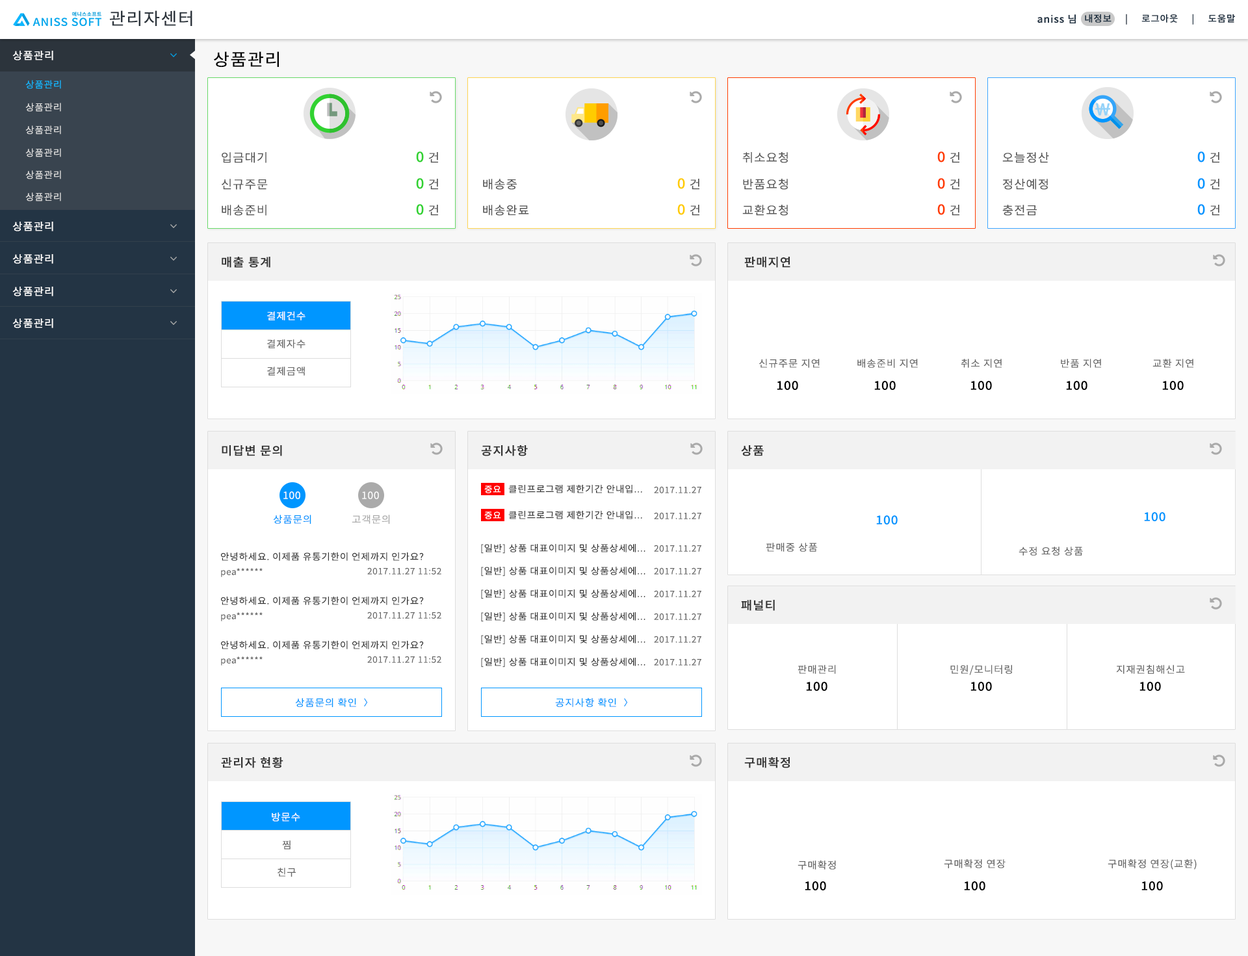
<style>
.page{position:relative;width:1248px;height:956px;background:#ffffff}
.page>*{position:absolute;margin:0}
.t1{font:16.9px "NotoSansCJKkr-Regular";letter-spacing:0.05em;color:#2c343c;scale:1.05 1}
.t2{font:9.7px "NotoSansCJKkr-Medium";letter-spacing:0.05em;color:#233444;scale:1.05 1}
.t3{font:9.1px "NotoSansCJKkr-Medium";letter-spacing:0.05em;color:#233444;scale:1.05 1}
.t4{font:10.4px "NotoSansCJKkr-Regular";letter-spacing:0.05em;color:#ffffff;scale:1.05 1}
.t5{font:16.9px "NotoSansCJKkr-Regular";letter-spacing:0.05em;color:#010101;scale:1.05 1}
.t6{font:9.1px "NotoSansCJKkr-DemiLight";letter-spacing:0.05em;color:#0fb7ff;scale:1.05 1}
.t7{font:9.1px "NotoSansCJKkr-DemiLight";letter-spacing:0.05em;color:#dedede;scale:1.05 1}
.t8{font:11.7px "NotoSansCJKkr-DemiLight";letter-spacing:0.05em;color:#555555;scale:1.05 1}
.t9{font:13.6px "NotoSansCJKkr-Medium";letter-spacing:0.05em;color:#31d231;scale:1.05 1}
.t10{font:13.6px "NotoSansCJKkr-Medium";letter-spacing:0.05em;color:#ff3c00;scale:1.05 1}
.t11{font:13.6px "NotoSansCJKkr-Medium";letter-spacing:0.05em;color:#0096ff;scale:1.05 1}
.t12{font:13.6px "NotoSansCJKkr-Medium";letter-spacing:0.05em;color:#ffcc00;scale:1.05 1}
.t13{font:11.7px "NotoSansCJKkr-Medium";letter-spacing:0.05em;color:#333333;scale:1.05 1}
.t14{font:9.7px "NotoSansCJKkr-DemiLight";letter-spacing:0.05em;color:#fffdfd;scale:1.05 1}
.t15{font:9.7px "NotoSansCJKkr-DemiLight";letter-spacing:0.05em;color:#666666;scale:1.05 1}
.t16{font:11.7px "NotoSansCJKkr-Medium";letter-spacing:0.05em;color:#000000;scale:1.05 1}
.t17{font:8.4px "NotoSansCJKkr-DemiLight";letter-spacing:0.05em;color:#ffffff;scale:1.05 1}
.t18{font:9.1px "NotoSansCJKkr-DemiLight";letter-spacing:0.05em;color:#333333;scale:1.05 1}
.t19{font:9.7px "NotoSansCJKkr-DemiLight";letter-spacing:0.05em;color:#ffffff;scale:1.05 1}
.t20{font:8.4px "NotoSansCJKkr-DemiLight";letter-spacing:0.05em;color:#666666;scale:1.05 1}
.t21{font:9.7px "NotoSansCJKkr-DemiLight";letter-spacing:0.05em;color:#0096ff;scale:1.05 1}
.t22{font:9.7px "NotoSansCJKkr-DemiLight";letter-spacing:0.05em;color:#aaaaaa;scale:1.05 1}
.t23{font:11.7px "NotoSansCJKkr-Medium";letter-spacing:0.05em;color:#0096ff;scale:1.05 1}
.t24{font:8.4px "YDIYGO320";letter-spacing:0.05em;color:#0096ff;scale:1.05 1}
</style>
<div class="page">
<p class="t1" style="left:110px;top:10px;width:82px;height:16px">관리자센터</p>
<p class="t2" style="left:1037px;top:14px;width:38px;height:9px">aniss 님</p>
<p class="t3" style="left:1084px;top:14px;width:151px;height:11px">내정보     |     로그아웃     |     도움말</p>
<p class="t4" style="left:12px;top:51px;width:41px;height:9px">상품관리</p>
<p class="t5" style="left:214px;top:51px;width:65px;height:16px">상품관리</p>
<p class="t6" style="left:25px;top:80px;width:36px;height:9px">상품관리</p>
<p class="t7" style="left:25px;top:103px;width:36px;height:9px">상품관리</p>
<p class="t7" style="left:25px;top:125px;width:36px;height:10px">상품관리</p>
<p class="t7" style="left:25px;top:148px;width:36px;height:9px">상품관리</p>
<p class="t8" style="left:222px;top:152px;width:44px;height:11px">입금대기</p>
<p class="t9" style="left:416px;top:151px;width:22px;height:12px">0 <span class="t8">건</span></p>
<p class="t8" style="left:742px;top:152px;width:46px;height:11px">취소요청</p>
<p class="t10" style="left:937px;top:151px;width:22px;height:12px">0 <span class="t8">건</span></p>
<p class="t8" style="left:1002px;top:152px;width:47px;height:11px">오늘정산</p>
<p class="t11" style="left:1197px;top:151px;width:22px;height:12px">0 <span class="t8">건</span></p>
<p class="t7" style="left:25px;top:170px;width:36px;height:9px">상품관리</p>
<p class="t8" style="left:222px;top:179px;width:46px;height:11px">신규주문</p>
<p class="t9" style="left:416px;top:178px;width:22px;height:12px">0 <span class="t8">건</span></p>
<p class="t8" style="left:483px;top:179px;width:34px;height:11px">배송중</p>
<p class="t12" style="left:677px;top:178px;width:22px;height:12px">0 <span class="t8">건</span></p>
<p class="t8" style="left:743px;top:179px;width:45px;height:11px">반품요청</p>
<p class="t10" style="left:937px;top:178px;width:22px;height:12px">0 <span class="t8">건</span></p>
<p class="t8" style="left:1002px;top:179px;width:45px;height:11px">정산예정</p>
<p class="t11" style="left:1197px;top:178px;width:22px;height:12px">0 <span class="t8">건</span></p>
<p class="t7" style="left:25px;top:192px;width:36px;height:9px">상품관리</p>
<p class="t8" style="left:222px;top:205px;width:44px;height:11px">배송준비</p>
<p class="t9" style="left:416px;top:204px;width:22px;height:12px">0 <span class="t8">건</span></p>
<p class="t8" style="left:483px;top:205px;width:46px;height:11px">배송완료</p>
<p class="t12" style="left:677px;top:204px;width:22px;height:12px">0 <span class="t8">건</span></p>
<p class="t8" style="left:742px;top:205px;width:46px;height:11px">교환요청</p>
<p class="t10" style="left:937px;top:204px;width:22px;height:12px">0 <span class="t8">건</span></p>
<p class="t8" style="left:1002px;top:205px;width:34px;height:11px">충전금</p>
<p class="t11" style="left:1197px;top:204px;width:22px;height:12px">0 <span class="t8">건</span></p>
<p class="t4" style="left:12px;top:222px;width:41px;height:9px">상품관리</p>
<p class="t4" style="left:12px;top:254px;width:41px;height:10px">상품관리</p>
<p class="t13" style="left:222px;top:257px;width:48px;height:11px">매출 통계</p>
<p class="t13" style="left:744px;top:257px;width:46px;height:11px">판매지연</p>
<p class="t4" style="left:12px;top:287px;width:41px;height:9px">상품관리</p>
<p class="t14" style="left:267px;top:311px;width:38px;height:9px">결제건수</p>
<p class="t4" style="left:12px;top:318px;width:41px;height:10px">상품관리</p>
<p class="t15" style="left:267px;top:339px;width:38px;height:9px">결제자수</p>
<p class="t15" style="left:759px;top:359px;width:60px;height:9px">신규주문 지연</p>
<p class="t15" style="left:857px;top:359px;width:60px;height:9px">배송준비 지연</p>
<p class="t15" style="left:960px;top:359px;width:41px;height:9px">취소 지연</p>
<p class="t15" style="left:1060px;top:359px;width:41px;height:9px">반품 지연</p>
<p class="t15" style="left:1152px;top:359px;width:41px;height:9px">교환 지연</p>
<p class="t15" style="left:267px;top:366px;width:38px;height:10px">결제금액</p>
<p class="t16" style="left:776px;top:381px;width:22px;height:9px">100</p>
<p class="t16" style="left:874px;top:381px;width:21px;height:9px">100</p>
<p class="t16" style="left:970px;top:381px;width:22px;height:9px">100</p>
<p class="t16" style="left:1066px;top:381px;width:21px;height:9px">100</p>
<p class="t16" style="left:1162px;top:381px;width:21px;height:9px">100</p>
<p class="t13" style="left:222px;top:445px;width:60px;height:11px">미답변 문의</p>
<p class="t13" style="left:481px;top:445px;width:47px;height:11px">공지사항</p>
<p class="t13" style="left:741px;top:445px;width:22px;height:11px">상품</p>
<p class="t17" style="left:484px;top:485px;width:17px;height:8px">중요</p>
<p class="t18" style="left:508px;top:485px;width:134px;height:8px">클린프로그램 제한기간 안내입...</p>
<p class="t19" style="left:283px;top:491px;width:17px;height:8px">100</p>
<p class="t19" style="left:362px;top:491px;width:17px;height:8px">100</p>
<p class="t20" style="left:654px;top:486px;width:47px;height:7px">2017.11.27</p>
<p class="t21" style="left:273px;top:515px;width:38px;height:9px">상품문의</p>
<p class="t22" style="left:352px;top:515px;width:38px;height:9px">고객문의</p>
<p class="t17" style="left:484px;top:511px;width:17px;height:8px">중요</p>
<p class="t18" style="left:508px;top:511px;width:134px;height:8px">클린프로그램 제한기간 안내입...</p>
<p class="t20" style="left:654px;top:512px;width:47px;height:7px">2017.11.27</p>
<p class="t23" style="left:876px;top:515px;width:21px;height:9px">100</p>
<p class="t23" style="left:1144px;top:512px;width:21px;height:9px">100</p>
<p class="t18" style="left:481px;top:544px;width:164px;height:10px">[일반] 상품 대표이미지 및 상품상세에...</p>
<p class="t20" style="left:654px;top:545px;width:47px;height:7px">2017.11.27</p>
<p class="t15" style="left:765px;top:543px;width:52px;height:9px">판매중 상품</p>
<p class="t18" style="left:221px;top:552px;width:203px;height:9px">안녕하세요. 이제품 유통기한이 언제까지 인가요?</p>
<p class="t15" style="left:1018px;top:546px;width:65px;height:10px">수정 요청 상품</p>
<p class="t20" style="left:221px;top:568px;width:42px;height:9px">pea******</p>
<p class="t20" style="left:367px;top:567px;width:74px;height:7px">2017.11.27 11:52</p>
<p class="t18" style="left:481px;top:567px;width:164px;height:9px">[일반] 상품 대표이미지 및 상품상세에...</p>
<p class="t20" style="left:654px;top:567px;width:47px;height:7px">2017.11.27</p>
<p class="t18" style="left:481px;top:589px;width:164px;height:10px">[일반] 상품 대표이미지 및 상품상세에...</p>
<p class="t20" style="left:654px;top:590px;width:47px;height:7px">2017.11.27</p>
<p class="t18" style="left:221px;top:596px;width:203px;height:9px">안녕하세요. 이제품 유통기한이 언제까지 인가요?</p>
<p class="t13" style="left:741px;top:600px;width:34px;height:11px">패널티</p>
<p class="t20" style="left:221px;top:612px;width:42px;height:9px">pea******</p>
<p class="t20" style="left:367px;top:611px;width:74px;height:8px">2017.11.27 11:52</p>
<p class="t18" style="left:481px;top:612px;width:164px;height:10px">[일반] 상품 대표이미지 및 상품상세에...</p>
<p class="t20" style="left:654px;top:613px;width:47px;height:7px">2017.11.27</p>
<p class="t18" style="left:221px;top:641px;width:203px;height:8px">안녕하세요. 이제품 유통기한이 언제까지 인가요?</p>
<p class="t18" style="left:481px;top:635px;width:164px;height:10px">[일반] 상품 대표이미지 및 상품상세에...</p>
<p class="t20" style="left:654px;top:635px;width:47px;height:8px">2017.11.27</p>
<p class="t20" style="left:221px;top:656px;width:42px;height:9px">pea******</p>
<p class="t20" style="left:367px;top:656px;width:74px;height:7px">2017.11.27 11:52</p>
<p class="t18" style="left:481px;top:658px;width:164px;height:9px">[일반] 상품 대표이미지 및 상품상세에...</p>
<p class="t20" style="left:654px;top:658px;width:47px;height:7px">2017.11.27</p>
<p class="t15" style="left:797px;top:665px;width:39px;height:9px">판매관리</p>
<p class="t15" style="left:950px;top:665px;width:62px;height:10px">민원/모니터링</p>
<p class="t15" style="left:1116px;top:665px;width:69px;height:9px">지재권침해신고</p>
<p class="t16" style="left:806px;top:682px;width:21px;height:9px">100</p>
<p class="t16" style="left:970px;top:682px;width:22px;height:9px">100</p>
<p class="t16" style="left:1139px;top:682px;width:21px;height:9px">100</p>
<p class="t21" style="left:295px;top:698px;width:61px;height:9px">상품문의 확인</p>
<p class="t24" style="left:364px;top:698px;width:4px;height:8px">&gt;</p>
<p class="t21" style="left:555px;top:698px;width:61px;height:9px">공지사항 확인</p>
<p class="t24" style="left:624px;top:698px;width:4px;height:8px">&gt;</p>
<p class="t13" style="left:221px;top:757px;width:62px;height:11px">관리자 현황</p>
<p class="t13" style="left:744px;top:757px;width:45px;height:11px">구매확정</p>
<p class="t14" style="left:272px;top:812px;width:28px;height:9px">방문수</p>
<p class="t15" style="left:282px;top:840px;width:8px;height:9px">찜</p>
<p class="t15" style="left:277px;top:867px;width:19px;height:10px">친구</p>
<p class="t15" style="left:797px;top:860px;width:39px;height:9px">구매확정</p>
<p class="t15" style="left:943px;top:859px;width:62px;height:9px">구매확정 연장</p>
<p class="t15" style="left:1107px;top:859px;width:89px;height:10px">구매확정 연장(교환)</p>
<p class="t16" style="left:804px;top:881px;width:22px;height:9px">100</p>
<p class="t16" style="left:964px;top:881px;width:21px;height:9px">100</p>
<p class="t16" style="left:1141px;top:881px;width:21px;height:9px">100</p>
</div>
